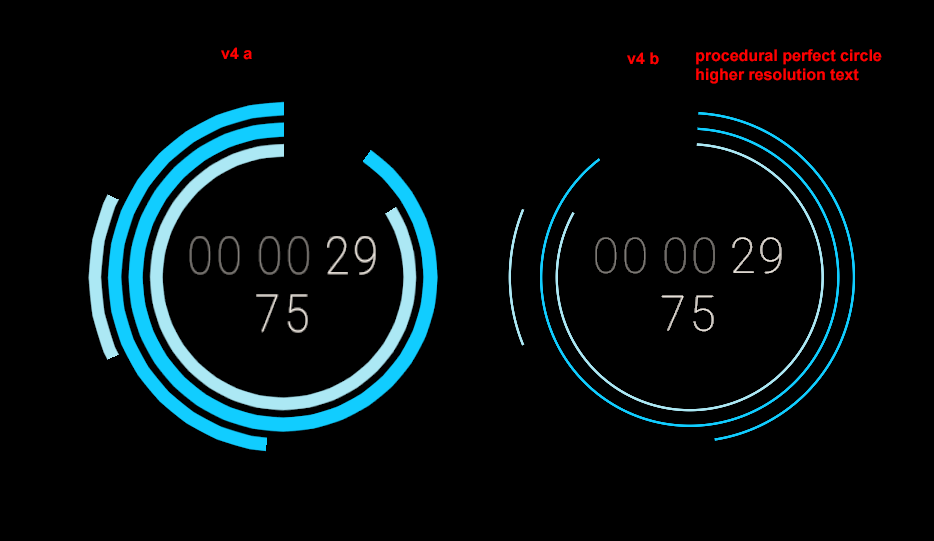
<style>
.page{position:relative;width:934px;height:541px;background:#000000}
.page>*{position:absolute;margin:0}
.t1{font:16px "Arial-BoldMT";color:#ff0000}
</style>
<div class="page">
<p class="t1" style="left:221px;top:47px;width:31px;height:13px">v4 a</p>
<p class="t1" style="left:627px;top:52px;width:32px;height:13px">v4 b</p>
<p class="t1" style="left:696px;top:49px;width:186px;height:35px">procedural perfect circle<br>higher resolution text</p>
</div>
